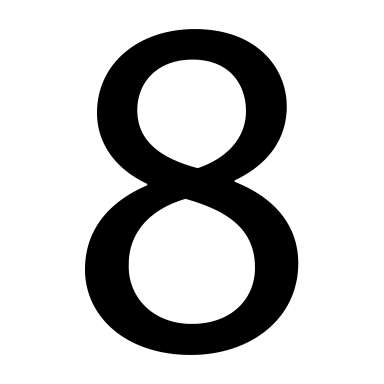
<style>
.page{position:relative;width:384px;height:384px;background:#ffffff}
.page>*{position:absolute;margin:0}
.t1{font:486.1px "MyriadPro-Regular";color:#000000}
</style>
<div class="page">
<p class="t1" style="left:85px;top:29px;width:214px;height:326px">8</p>
</div>
